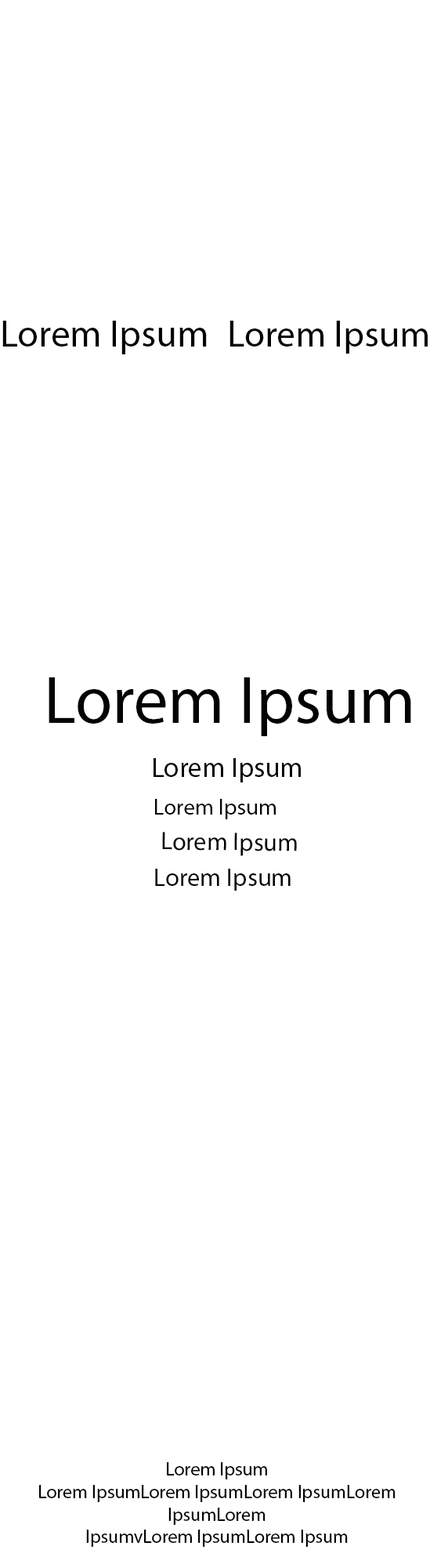
<style>
.page{position:relative;width:448px;height:1568px;background:#ffffff}
.page>*{position:absolute;margin:0}
.t1{font:38.2px "MyriadPro-Regular";color:#030303}
.t2{font:37.2px "MyriadPro-Regular";color:#030303}
.t3{font:68px "MyriadPro-Regular";color:#030303}
.t4{font:27.8px "MyriadPro-Regular";color:#030303}
.t5{font:22.6px "MyriadPro-Regular";color:#030303}
.t6{font:25.2px "MyriadPro-Regular";color:#030303}
.t7{font:25.4px "MyriadPro-Regular";color:#030303}
.t8{font:18.8px "MyriadPro-Regular";color:#030303}
</style>
<div class="page">
<p class="t1" style="left:2px;top:321px;width:205px;height:33px">Lorem Ipsum</p>
<p class="t2" style="left:230px;top:321px;width:198px;height:33px">Lorem Ipsum</p>
<p class="t3" style="left:49px;top:677px;width:363px;height:59px">Lorem Ipsum</p>
<p class="t4" style="left:154px;top:758px;width:147px;height:24px">Lorem Ipsum</p>
<p class="t5" style="left:155px;top:799px;width:121px;height:20px">Lorem Ipsum</p>
<p class="t6" style="left:162px;top:832px;width:135px;height:24px;rotate:1deg">Lorem Ipsum</p>
<p class="t7" style="left:155px;top:869px;width:136px;height:22px">Lorem Ipsum</p>
<p class="t8" style="left:39px;top:1462px;width:357px;height:85px;text-align:center">Lorem Ipsum<br>Lorem IpsumLorem IpsumLorem IpsumLorem<br> IpsumLorem <br>IpsumvLorem IpsumLorem Ipsum</p>
</div>
